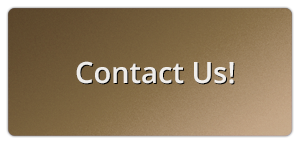
<style>
.page{position:relative;width:300px;height:144px}
.page>*{position:absolute;margin:0}
.t1{font:29.2px "OpenSans-Semibold";color:#ffffff}
</style>
<div class="page">
<p class="t1" style="left:76px;top:61px;width:158px;height:23px">Contact Us!</p>
</div>
